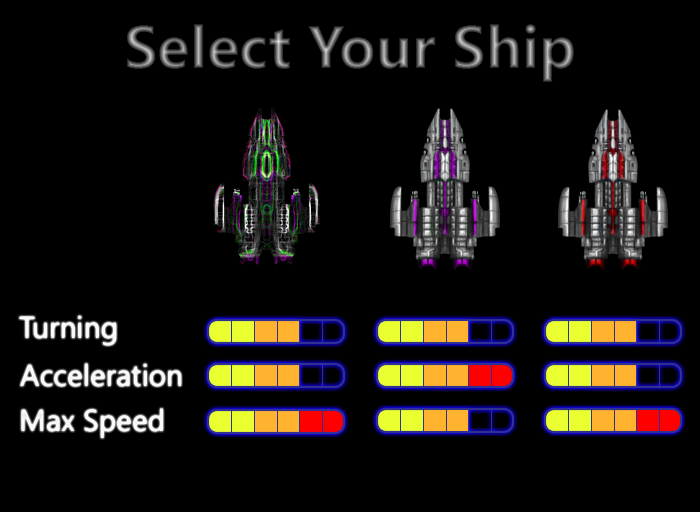
<style>
.page{position:relative;width:700px;height:512px;background:#000000}
.page>*{position:absolute;margin:0}
.t1{font:60px "Gadugi-Bold"}
.t2{font:30.3px "Gadugi";color:#ffffff}
</style>
<div class="page">
<p class="t1" style="left:126px;top:24px;width:449px;height:58px">Select Your Ship</p>
<p class="t2" style="left:19px;top:315px;width:97px;height:31px">Turning</p>
<p class="t2" style="left:20px;top:363px;width:161px;height:24px">Acceleration</p>
<p class="t2" style="left:21px;top:408px;width:142px;height:30px">Max Speed</p>
</div>
